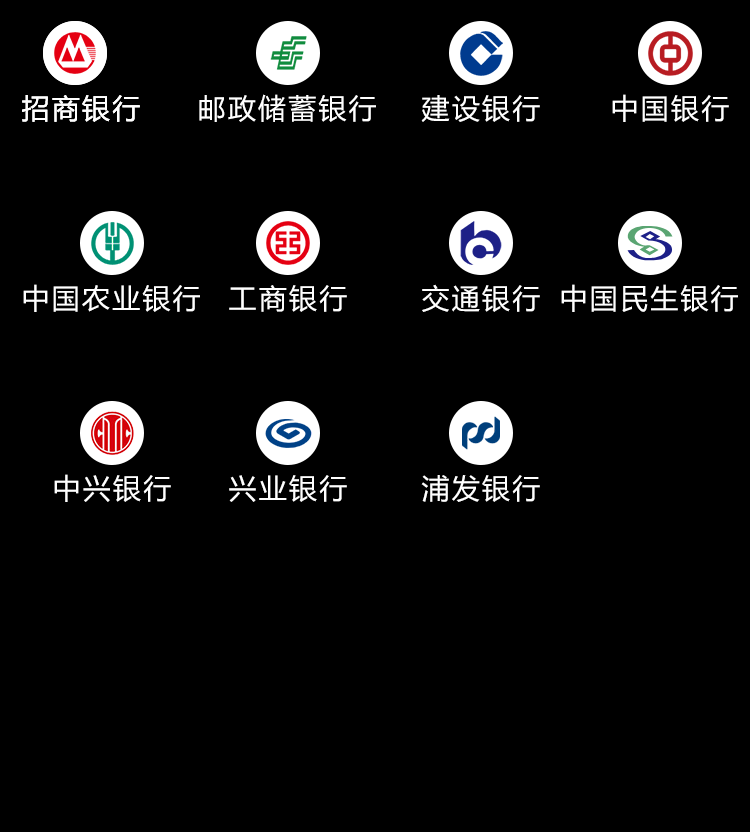
<style>
.page{position:relative;width:750px;height:832px;background:#000000}
.page>*{position:absolute;margin:0}
.t1{font:28px "MicrosoftYaHei";letter-spacing:0.08em;color:#ffffff}
</style>
<div class="page">
<p class="t1" style="left:22px;top:95px;width:118px;height:27px">招商银行</p>
<p class="t1" style="left:22px;top:95px;width:118px;height:27px">招商银行</p>
<p class="t1" style="left:199px;top:94px;width:177px;height:28px">邮政储蓄银行</p>
<p class="t1" style="left:421px;top:95px;width:119px;height:27px">建设银行</p>
<p class="t1" style="left:612px;top:94px;width:117px;height:28px">中国银行</p>
<p class="t1" style="left:23px;top:284px;width:177px;height:28px">中国农业银行</p>
<p class="t1" style="left:229px;top:285px;width:118px;height:27px">工商银行</p>
<p class="t1" style="left:422px;top:284px;width:118px;height:28px">交通银行</p>
<p class="t1" style="left:561px;top:284px;width:177px;height:28px">中国民生银行</p>
<p class="t1" style="left:54px;top:474px;width:117px;height:28px">中兴银行</p>
<p class="t1" style="left:229px;top:475px;width:118px;height:27px">兴业银行</p>
<p class="t1" style="left:421px;top:475px;width:119px;height:27px">浦发银行</p>
</div>
